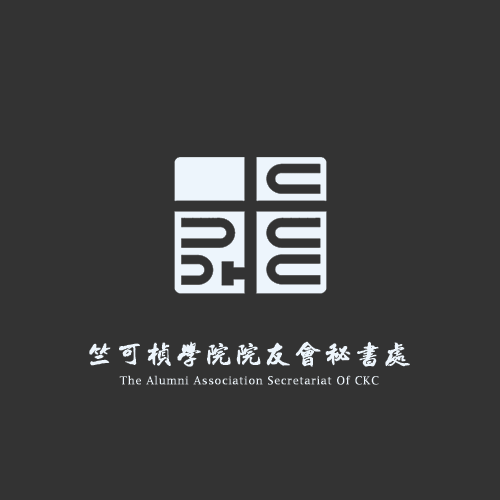
<style>
.page{position:relative;width:500px;height:500px;background:#333333}
.page>*{position:absolute;margin:0}
.t1{font:29px "beifang";color:#ffffff;font-weight:bold}
.t2{font:11px "LucidaFax";letter-spacing:0.019em;color:#ffffff;font-weight:bold}
.t3{font:13px "LucidaFax";color:#ffffff;font-weight:bold}
</style>
<div class="page">
<p class="t1" style="left:89px;top:341px;width:321px;height:26px">竺可桢学院院友会秘书处</p>
<p class="t2" style="left:119px;top:375px;width:260px;height:10px"><span class="t3"> </span>The Alumni Association Secretariat Of CKC</p>
</div>
